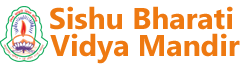
<style>
.page{position:relative;width:240px;height:67px;background:#ffffff}
.page>*{position:absolute;margin:0}
.t1{font:30px "Ebrima-Bold";color:#ee7911}
</style>
<div class="page">
<p class="t1" style="left:50px;top:6px;width:183px;height:24px">Sishu Bharati</p>
<p class="t1" style="left:50px;top:33px;width:190px;height:31px">Vidya Mandir</p>
</div>
